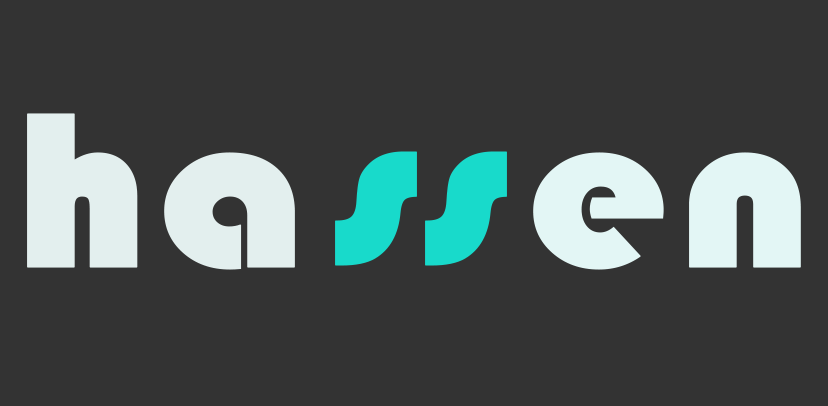
<style>
.page{position:relative;width:828px;height:406px;background:#333333}
.page>*{position:absolute;margin:0}
.t1{font:230.1px "Bauhaus93";color:#e3efee;font-weight:bold;scale:1.11 1}
.t2{font:230.1px "Bauhaus93";color:#e3f6f5;font-weight:bold;scale:1.11 1}
.t3{font:230.1px "Bauhaus93";color:#18dacb;font-weight:bold}
</style>
<div class="page">
<p class="t1" style="left:27px;top:113px;width:774px;height:157px">ha   <span class="t2">en</span></p>
<p class="t3" style="left:335px;top:151px;width:172px;height:115px">ss</p>
</div>
